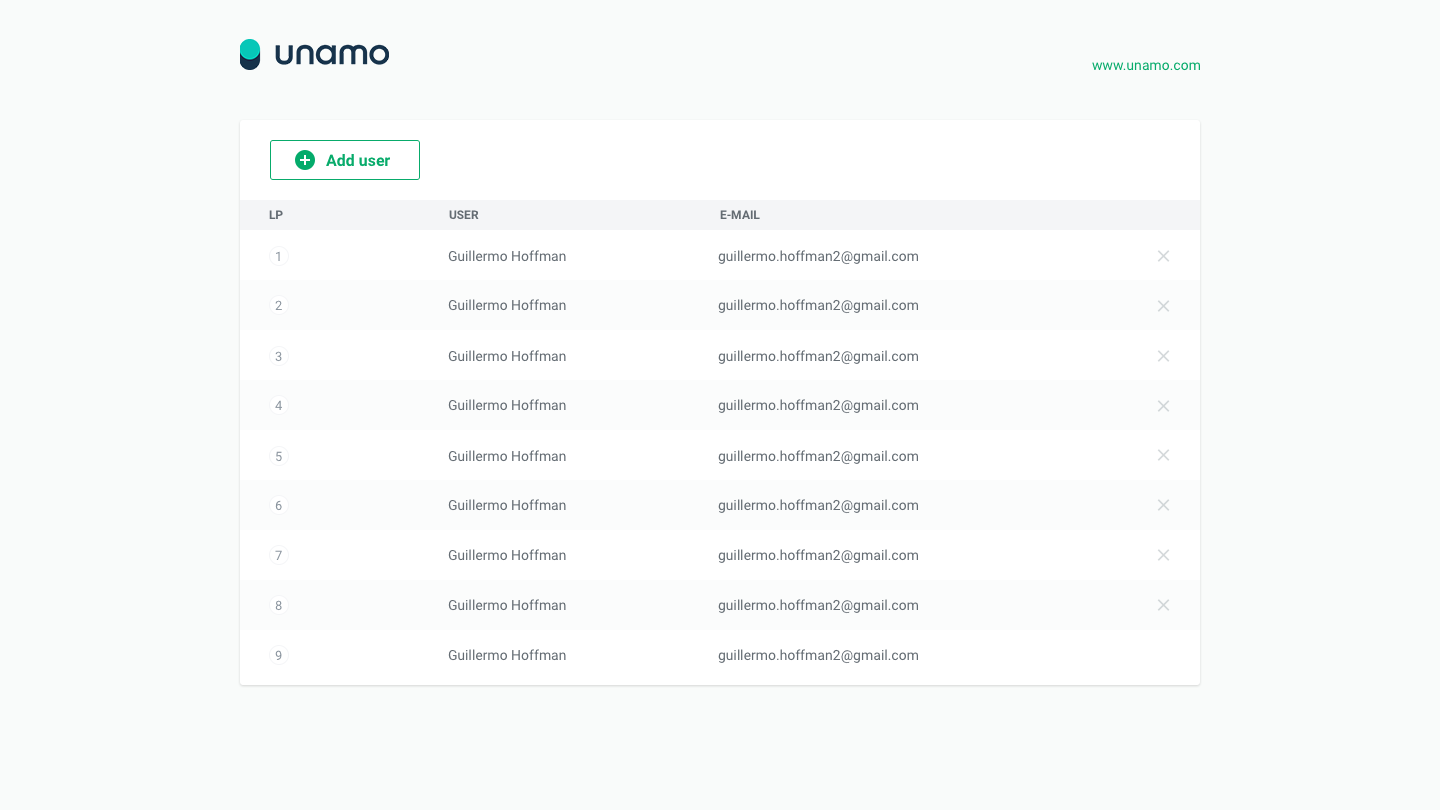
<style>
.page{position:relative;width:1440px;height:810px;background:#f9fbfa}
.page>*{position:absolute;margin:0}
.t1{font:14px "Roboto-Regular";color:#08ab6b}
.t2{font:16px "Roboto-Bold";color:#08ab6b}
.t3{font:12px "Roboto-Bold";color:#646c73}
.t4{font:13px "Roboto-Regular";color:#8a949e}
.t5{font:14px "Roboto-Regular";color:#646c73}
</style>
<div class="page">
<p class="t1" style="left:1092px;top:62px;width:108px;height:9px">www.unamo.com</p>
<p class="t2" style="left:326px;top:154px;width:64px;height:13px">Add user</p>
<p class="t3" style="left:269px;top:210px;width:14px;height:9px">LP</p>
<p class="t3" style="left:449px;top:210px;width:30px;height:10px">USER</p>
<p class="t3" style="left:720px;top:210px;width:40px;height:9px">E-MAIL</p>
<p class="t4" style="left:276px;top:251px;width:4px;height:10px">1</p>
<p class="t5" style="left:448px;top:250px;width:118px;height:12px">Guillermo Hoffman</p>
<p class="t5" style="left:718px;top:250px;width:200px;height:15px">guillermo.hoffman2@gmail.com</p>
<p class="t4" style="left:275px;top:300px;width:7px;height:10px">2</p>
<p class="t5" style="left:448px;top:299px;width:118px;height:12px">Guillermo Hoffman</p>
<p class="t5" style="left:718px;top:299px;width:200px;height:15px">guillermo.hoffman2@gmail.com</p>
<p class="t4" style="left:275px;top:351px;width:7px;height:11px">3</p>
<p class="t5" style="left:448px;top:350px;width:118px;height:12px">Guillermo Hoffman</p>
<p class="t5" style="left:718px;top:350px;width:200px;height:15px">guillermo.hoffman2@gmail.com</p>
<p class="t4" style="left:275px;top:400px;width:7px;height:10px">4</p>
<p class="t5" style="left:448px;top:399px;width:118px;height:12px">Guillermo Hoffman</p>
<p class="t5" style="left:718px;top:399px;width:200px;height:15px">guillermo.hoffman2@gmail.com</p>
<p class="t4" style="left:276px;top:451px;width:6px;height:11px">5</p>
<p class="t5" style="left:448px;top:450px;width:118px;height:12px">Guillermo Hoffman</p>
<p class="t5" style="left:718px;top:450px;width:200px;height:15px">guillermo.hoffman2@gmail.com</p>
<p class="t4" style="left:275px;top:500px;width:7px;height:11px">6</p>
<p class="t5" style="left:448px;top:499px;width:118px;height:12px">Guillermo Hoffman</p>
<p class="t5" style="left:718px;top:499px;width:200px;height:15px">guillermo.hoffman2@gmail.com</p>
<p class="t4" style="left:275px;top:550px;width:7px;height:10px">7</p>
<p class="t5" style="left:448px;top:549px;width:118px;height:12px">Guillermo Hoffman</p>
<p class="t5" style="left:718px;top:549px;width:200px;height:15px">guillermo.hoffman2@gmail.com</p>
<p class="t4" style="left:275px;top:600px;width:7px;height:11px">8</p>
<p class="t5" style="left:448px;top:599px;width:118px;height:12px">Guillermo Hoffman</p>
<p class="t5" style="left:718px;top:599px;width:200px;height:15px">guillermo.hoffman2@gmail.com</p>
<p class="t4" style="left:275px;top:650px;width:7px;height:10px">9</p>
<p class="t5" style="left:448px;top:649px;width:118px;height:12px">Guillermo Hoffman</p>
<p class="t5" style="left:718px;top:649px;width:200px;height:15px">guillermo.hoffman2@gmail.com</p>
</div>
